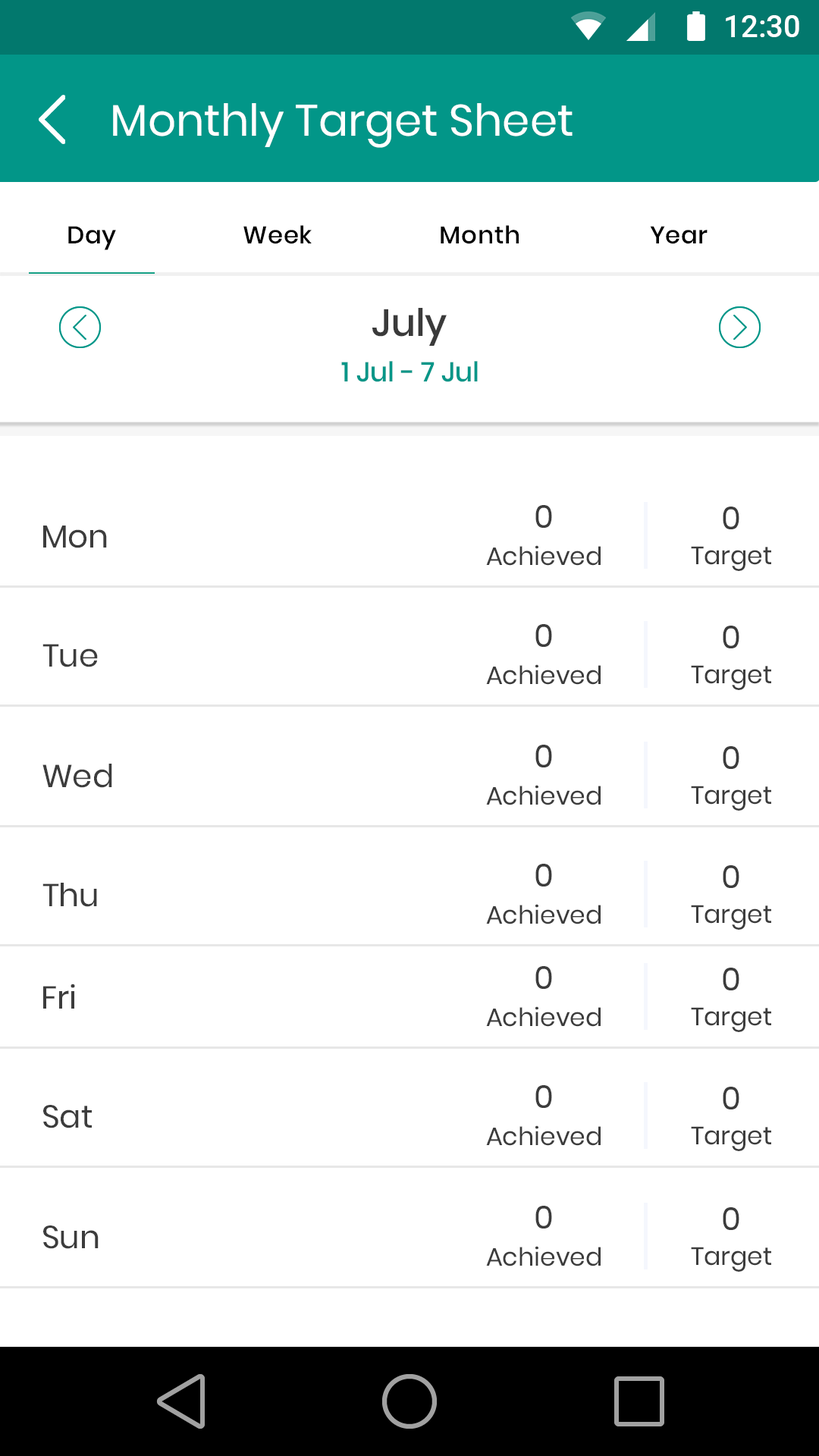
<style>
.page{position:relative;width:819px;height:1456px;background:#ffffff}
.page>*{position:absolute;margin:0}
.t1{font:31.1px "Roboto-Medium";color:#ffffff}
.t2{font:44px "Poppins-Regular";color:#ffffff}
.t3{font:24.3px "Poppins-Medium";letter-spacing:0.025em;color:#000000}
.t4{font:37.9px "Poppins-Medium";color:#3a3a3a}
.t5{font:27.3px "Poppins-Medium";color:#029688}
.t6{font:31.8px "Poppins-Regular";color:#3c3c3c}
.t7{font:25.1px "Poppins-Regular";color:#3c3c3c}
</style>
<div class="page">
<p class="t1" style="left:726px;top:15px;width:73px;height:22px">12:30</p>
<p class="t2" style="left:113px;top:103px;width:460px;height:45px">Monthly Target Sheet</p>
<p class="t3" style="left:68px;top:226px;width:48px;height:24px">Day</p>
<p class="t3" style="left:243px;top:225px;width:69px;height:19px">Week</p>
<p class="t3" style="left:441px;top:225px;width:78px;height:19px">Month</p>
<p class="t3" style="left:650px;top:226px;width:58px;height:18px">Year</p>
<p class="t4" style="left:372px;top:308px;width:75px;height:38px">July</p>
<p class="t5" style="left:341px;top:361px;width:137px;height:21px">1 Jul - 7 Jul</p>
<p class="t6" style="left:535px;top:505px;width:17px;height:23px">0</p>
<p class="t6" style="left:723px;top:507px;width:16px;height:22px">0</p>
<p class="t6" style="left:43px;top:526px;width:64px;height:22px">Mon</p>
<p class="t7" style="left:486px;top:545px;width:115px;height:21px">Achieved</p>
<p class="t7" style="left:691px;top:546px;width:80px;height:25px">Target</p>
<p class="t6" style="left:535px;top:624px;width:17px;height:23px">0</p>
<p class="t6" style="left:723px;top:626px;width:16px;height:22px">0</p>
<p class="t6" style="left:42px;top:644px;width:56px;height:23px">Tue</p>
<p class="t7" style="left:486px;top:664px;width:115px;height:21px">Achieved</p>
<p class="t7" style="left:691px;top:665px;width:80px;height:25px">Target</p>
<p class="t6" style="left:535px;top:745px;width:17px;height:22px">0</p>
<p class="t6" style="left:723px;top:746px;width:16px;height:23px">0</p>
<p class="t6" style="left:42px;top:764px;width:70px;height:24px">Wed</p>
<p class="t7" style="left:486px;top:785px;width:115px;height:20px">Achieved</p>
<p class="t7" style="left:691px;top:786px;width:80px;height:25px">Target</p>
<p class="t6" style="left:535px;top:864px;width:17px;height:22px">0</p>
<p class="t6" style="left:723px;top:865px;width:16px;height:23px">0</p>
<p class="t6" style="left:42px;top:883px;width:55px;height:24px">Thu</p>
<p class="t7" style="left:486px;top:904px;width:115px;height:20px">Achieved</p>
<p class="t7" style="left:691px;top:905px;width:80px;height:25px">Target</p>
<p class="t6" style="left:535px;top:966px;width:17px;height:23px">0</p>
<p class="t6" style="left:723px;top:968px;width:16px;height:22px">0</p>
<p class="t6" style="left:43px;top:984px;width:32px;height:25px">Fri</p>
<p class="t7" style="left:486px;top:1006px;width:115px;height:21px">Achieved</p>
<p class="t7" style="left:691px;top:1007px;width:80px;height:25px">Target</p>
<p class="t6" style="left:535px;top:1085px;width:17px;height:23px">0</p>
<p class="t6" style="left:723px;top:1087px;width:16px;height:22px">0</p>
<p class="t6" style="left:43px;top:1105px;width:49px;height:23px">Sat</p>
<p class="t7" style="left:486px;top:1125px;width:115px;height:21px">Achieved</p>
<p class="t7" style="left:691px;top:1126px;width:80px;height:25px">Target</p>
<p class="t6" style="left:535px;top:1206px;width:17px;height:22px">0</p>
<p class="t6" style="left:723px;top:1207px;width:16px;height:23px">0</p>
<p class="t6" style="left:43px;top:1225px;width:56px;height:24px">Sun</p>
<p class="t7" style="left:486px;top:1246px;width:115px;height:20px">Achieved</p>
<p class="t7" style="left:691px;top:1247px;width:80px;height:25px">Target</p>
</div>
